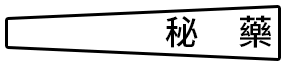
<style>
.page{position:relative;width:286px;height:66px;background:#ffffff}
.page>*{position:absolute;margin:0}
.t1{font:35px "NotoSansCJKtc-Medium";letter-spacing:0.06em;color:#000000}
</style>
<div class="page">
<p class="t1" style="left:165px;top:15px;width:106px;height:33px">秘　藥</p>
</div>
